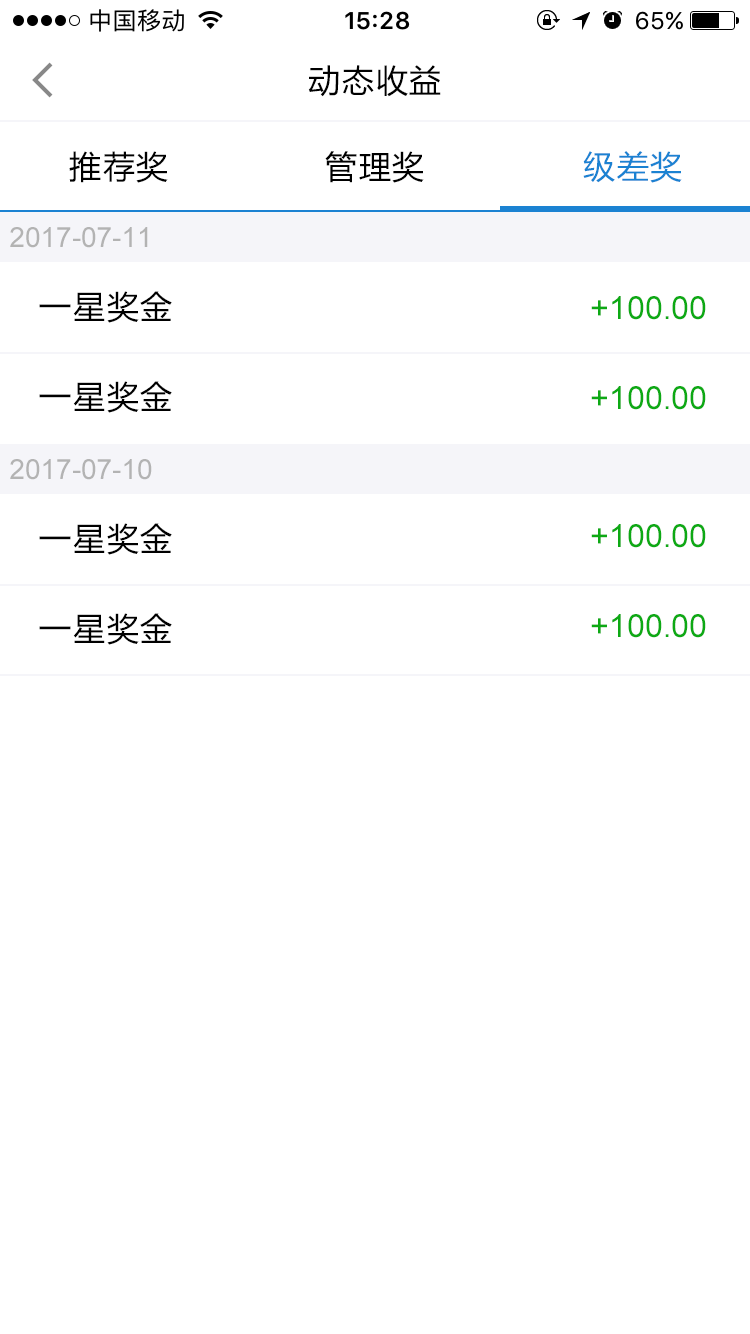
<style>
.page{position:relative;width:750px;height:1334px;background:#ffffff}
.page>*{position:absolute;margin:0}
.t1{font:32px "MicrosoftYaHei";letter-spacing:0.05em;color:#000000}
.t2{font:32px "MicrosoftYaHei";letter-spacing:0.05em;color:#1b82d2}
.t3{font:28px "ArialMT";color:#b3b3b3}
.t4{font:32px "ArialMT";color:#0da914}
</style>
<div class="page">
<p class="t1" style="left:308px;top:65px;width:133px;height:32px">动态收益</p>
<p class="t1" style="left:69px;top:151px;width:99px;height:32px">推荐奖</p>
<p class="t1" style="left:325px;top:151px;width:99px;height:32px">管理奖</p>
<p class="t2" style="left:583px;top:151px;width:99px;height:32px">级差奖</p>
<p class="t3" style="left:10px;top:227px;width:138px;height:21px">2017-07-11</p>
<p class="t1" style="left:39px;top:291px;width:133px;height:32px">一星奖金</p>
<p class="t4" style="left:591px;top:296px;width:115px;height:24px">+100.00</p>
<p class="t1" style="left:39px;top:381px;width:133px;height:32px">一星奖金</p>
<p class="t4" style="left:591px;top:386px;width:115px;height:24px">+100.00</p>
<p class="t3" style="left:10px;top:459px;width:142px;height:21px">2017-07-10</p>
<p class="t1" style="left:39px;top:523px;width:133px;height:32px">一星奖金</p>
<p class="t4" style="left:591px;top:524px;width:115px;height:24px">+100.00</p>
<p class="t1" style="left:39px;top:613px;width:133px;height:32px">一星奖金</p>
<p class="t4" style="left:591px;top:614px;width:115px;height:24px">+100.00</p>
</div>
